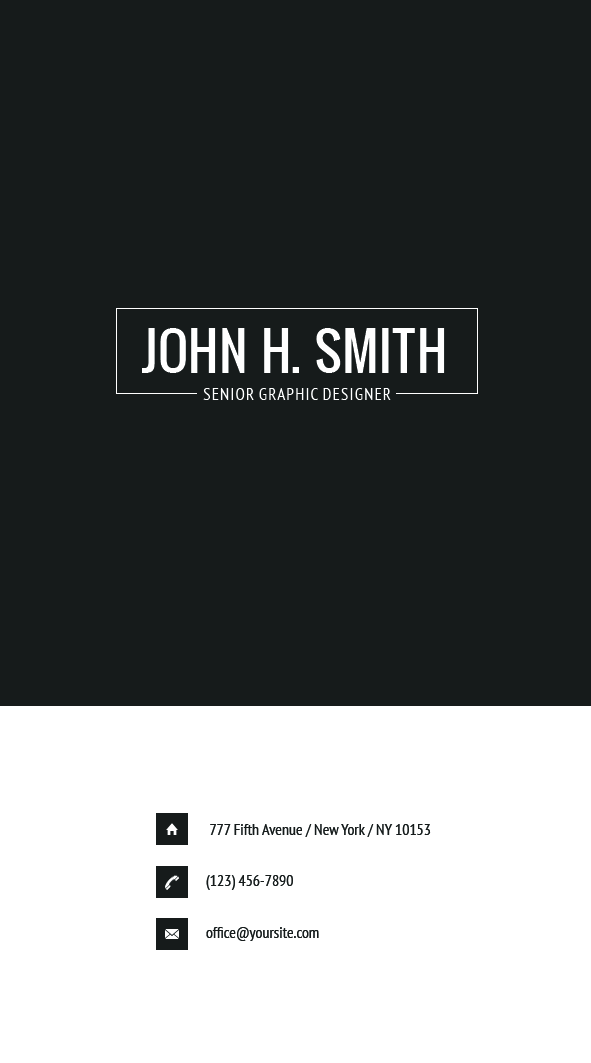
<style>
.page{position:relative;width:591px;height:1063px;background:#161b1b}
.page>*{position:absolute;margin:0}
.t1{font:50.8px "Oswald";color:#ffffff;text-transform:uppercase}
.t2{font:16.7px "PTSans-Narrow";color:#ffffff;text-transform:uppercase}
.t3{font:16px "PTSans-Narrow";color:#161b1b}
</style>
<div class="page">
<p class="t1" style="left:142px;top:328px;width:303px;height:45px">john H. smith</p>
<p class="t2" style="left:203px;top:388px;width:188px;height:12px">senior graphic designer</p>
<p class="t3" style="left:210px;top:824px;width:221px;height:13px">777 Fifth Avenue / New York / NY 10153</p>
<p class="t3" style="left:206px;top:875px;width:87px;height:15px">(123) 456-7890</p>
<p class="t3" style="left:206px;top:927px;width:113px;height:14px">office@yoursite.com</p>
</div>
